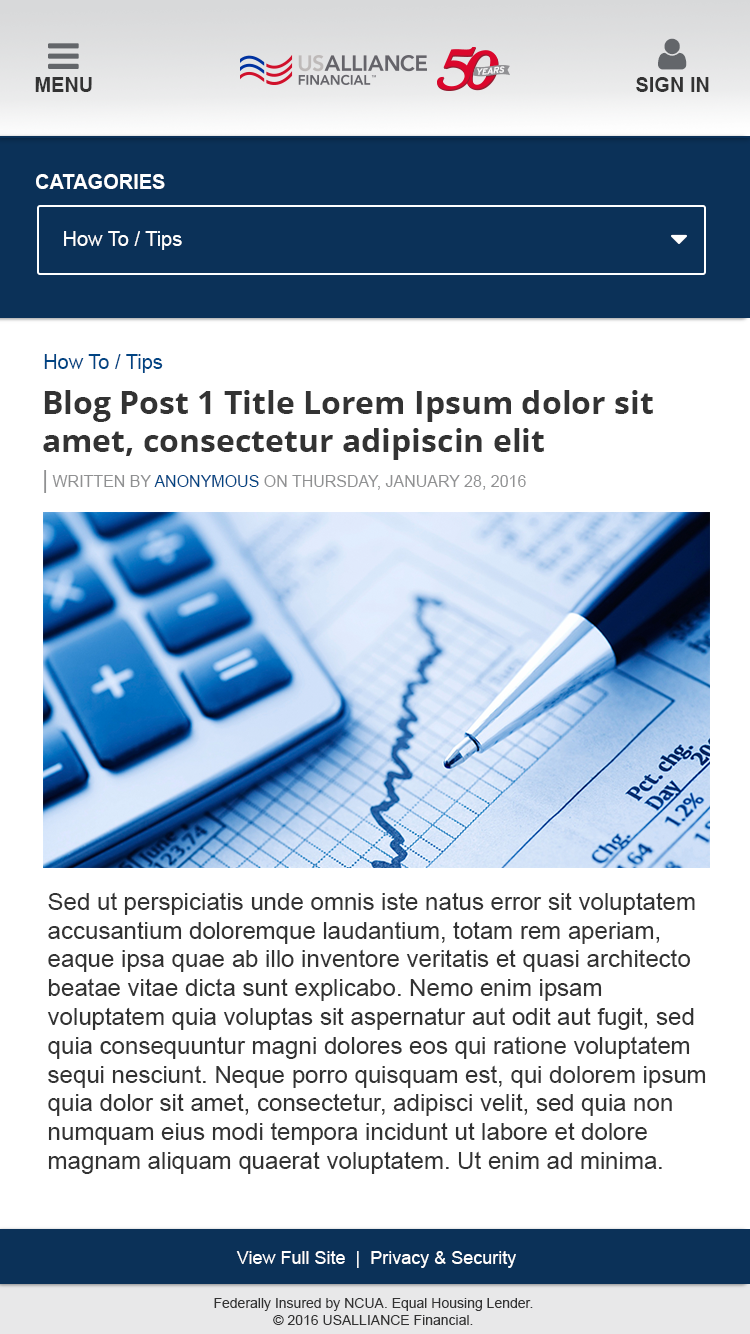
<style>
.page{position:relative;width:750px;height:1334px;background:#ffffff}
.page>*{position:absolute;margin:0}
.t1{font:20px "Arial-BoldMT";color:#333333}
.t2{font:20px "Arial-BoldMT";color:#ffffff}
.t3{font:20px "ArialMT";color:#ffffff}
.t4{font:20px "ArialMT";color:#004483}
.t5{font:32px "OpenSans-Bold";color:#333333}
.t6{font:16px "ArialMT";color:#909192}
.t7{font:24px "ArialMT";color:#909192}
.t8{font:16px "ArialMT";color:#004483}
.t9{font:24px "ArialMT";color:#333333}
.t10{font:18px "ArialMT";color:#ffffff}
.t11{font:14px "ArialMT";color:#333333}
</style>
<div class="page">
<p class="t1" style="left:35px;top:77px;width:57px;height:15px">MENU</p>
<p class="t1" style="left:636px;top:77px;width:73px;height:15px">SIGN IN</p>
<p class="t2" style="left:36px;top:174px;width:129px;height:15px">CATAGORIES</p>
<p class="t3" style="left:64px;top:231px;width:118px;height:19px">How To / Tips</p>
<p class="t4" style="left:44px;top:354px;width:119px;height:19px">How To / Tips</p>
<p class="t5" style="left:43px;top:390px;width:610px;height:70px">Blog Post 1 Title Lorem Ipsum dolor sit <br>amet, consectetur adipiscin elit</p>
<p class="t6" style="left:44px;top:470px;width:482px;height:23px"><span class="t7">|</span> WRITTEN BY <span class="t8">ANONYMOUS</span> ON THURSDAY, JANUARY 28, 2016</p>
<p class="t9" style="left:47px;top:892px;width:659px;height:282px">Sed ut perspiciatis unde omnis iste natus error sit voluptatem <br>accusantium doloremque laudantium, totam rem aperiam, <br>eaque ipsa quae ab illo inventore veritatis et quasi architecto <br>beatae vitae dicta sunt explicabo. Nemo enim ipsam <br>voluptatem quia voluptas sit aspernatur aut odit aut fugit, sed<br>quia consequuntur magni dolores eos qui ratione voluptatem<br>sequi nesciunt. Neque porro quisquam est, qui dolorem ipsum<br>quia dolor sit amet, consectetur, adipisci velit, sed quia non<br>numquam eius modi tempora incidunt ut labore et dolore <br>magnam aliquam quaerat voluptatem. Ut enim ad minima.</p>
<p class="t10" style="left:236px;top:1251px;width:280px;height:17px">View Full Site  |  Privacy &amp; Security</p>
<p class="t11" style="left:214px;top:1298px;width:319px;height:27px;text-align:center">Federally Insured by NCUA. Equal Housing Lender.<br>© 2016 USALLIANCE Financial.</p>
</div>
